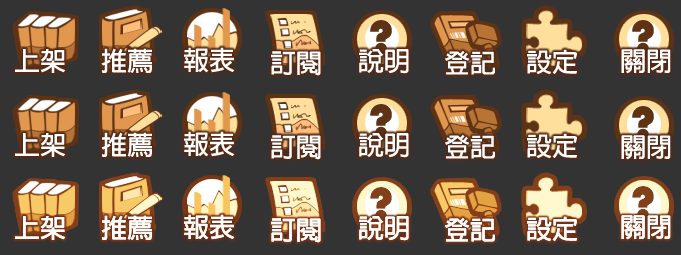
<style>
.page{position:relative;width:681px;height:255px;background:#333333}
.page>*{position:absolute;margin:0}
.t1{font:49px "Bauhaus93";color:#5e3215}
.t2{font:26px "AdobeFanHeitiStd-Bold";color:#ffffff}
</style>
<div class="page">
<p class="t1" style="left:370px;top:20px;width:22px;height:35px">?</p>
<p class="t1" style="left:632px;top:20px;width:22px;height:35px">?</p>
<p class="t2" style="left:15px;top:49px;width:50px;height:24px">上架</p>
<p class="t2" style="left:101px;top:48px;width:51px;height:25px">推薦</p>
<p class="t2" style="left:184px;top:47px;width:51px;height:26px">報表</p>
<p class="t2" style="left:271px;top:51px;width:50px;height:25px">訂閱</p>
<p class="t2" style="left:359px;top:49px;width:50px;height:25px">說明</p>
<p class="t2" style="left:445px;top:50px;width:50px;height:25px">登記</p>
<p class="t2" style="left:527px;top:49px;width:50px;height:26px">設定</p>
<p class="t2" style="left:621px;top:49px;width:50px;height:25px">關閉</p>
</div>
